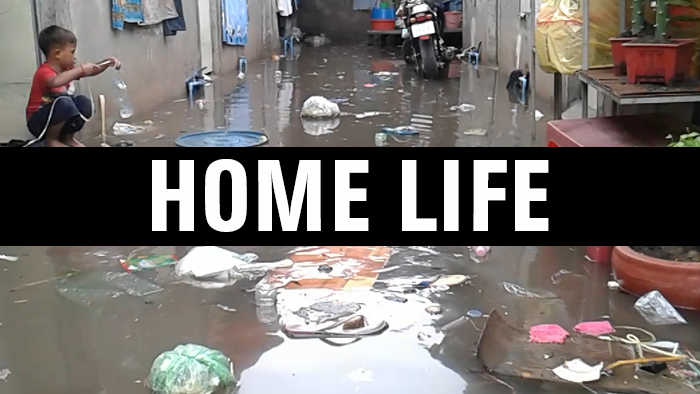
<style>
.page{position:relative;width:700px;height:394px}
.page>*{position:absolute;margin:0}
.t1{font:100px "AGBuchCondensedBQ-Medium";color:#fefefe}
</style>
<div class="page">
<p class="t1" style="left:152px;top:159px;width:397px;height:73px">HOME LIFE</p>
</div>
